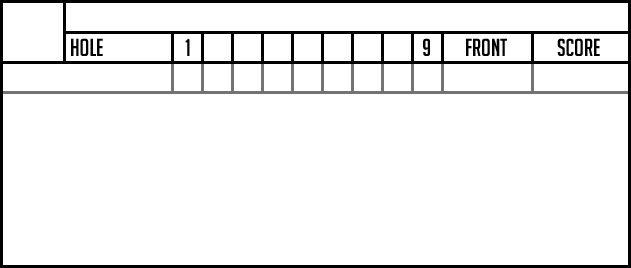
<style>
.page{position:relative;width:631px;height:268px;background:#ffffff}
.page>*{position:absolute;margin:0}
.t1{font:24px "BigNoodleTitling";color:#000000}
</style>
<div class="page">
<p class="t1" style="left:71px;top:38px;width:32px;height:18px">Hole</p>
<p class="t1" style="left:185px;top:38px;width:5px;height:18px">1</p>
<p class="t1" style="left:423px;top:38px;width:7px;height:18px">9</p>
<p class="t1" style="left:466px;top:38px;width:41px;height:18px">Front</p>
<p class="t1" style="left:557px;top:38px;width:43px;height:18px">score</p>
</div>
